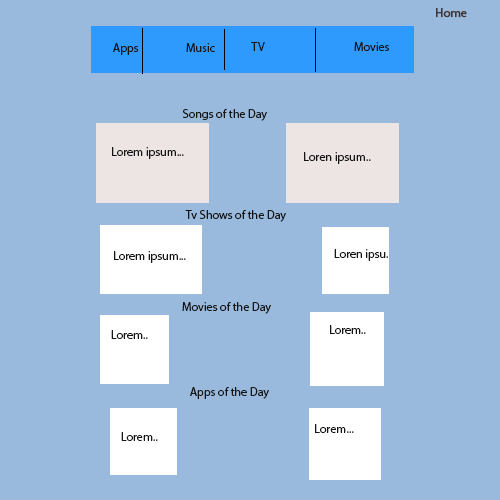
<style>
.page{position:relative;width:500px;height:500px;background:#99badd}
.page>*{position:absolute;margin:0}
.t1{font:12px "MyriadPro-Regular";color:#403738;font-weight:bold}
.t2{font:12px "MyriadPro-Regular";color:#151516}
</style>
<div class="page">
<p class="t1" style="left:436px;top:8px;width:31px;height:10px">Home</p>
<p class="t2" style="left:113px;top:43px;width:26px;height:12px">Apps</p>
<p class="t2" style="left:186px;top:43px;width:29px;height:9px">Music</p>
<p class="t2" style="left:251px;top:42px;width:14px;height:9px">TV</p>
<p class="t2" style="left:354px;top:42px;width:35px;height:9px">Movies</p>
<p class="t2" style="left:182px;top:109px;width:85px;height:12px">Songs of the Day</p>
<p class="t2" style="left:112px;top:147px;width:72px;height:12px">Lorem ipsum...</p>
<p class="t2" style="left:304px;top:152px;width:67px;height:12px">Loren ipsum..</p>
<p class="t2" style="left:185px;top:210px;width:101px;height:12px">Tv Shows of the Day</p>
<p class="t2" style="left:114px;top:251px;width:72px;height:12px">Lorem ipsum...</p>
<p class="t2" style="left:334px;top:249px;width:54px;height:12px">Loren ipsu.</p>
<p class="t2" style="left:182px;top:302px;width:89px;height:12px">Movies of the Day</p>
<p class="t2" style="left:330px;top:325px;width:36px;height:9px">Lorem..</p>
<p class="t2" style="left:111px;top:330px;width:37px;height:9px">Lorem..</p>
<p class="t2" style="left:190px;top:387px;width:79px;height:12px">Apps of the Day</p>
<p class="t2" style="left:315px;top:424px;width:39px;height:9px">Lorem...</p>
<p class="t2" style="left:121px;top:432px;width:37px;height:9px">Lorem..</p>
</div>
